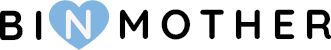
<style>
.page{position:relative;width:331px;height:50px;background:#ffffff}
.page>*{position:absolute;margin:0}
.t1{font:41.7px "Quicksand-Bold";letter-spacing:0.2em;color:#010101;text-transform:uppercase}
.t2{font:41.7px "Quicksand-Bold";letter-spacing:0.2em;color:#faf5f5;text-transform:uppercase}
</style>
<div class="page">
<p class="t1" style="left:0px;top:10px;width:42px;height:31px">BI</p>
<p class="t2" style="left:65px;top:9px;width:26px;height:31px">N</p>
<p class="t1" style="left:119px;top:9px;width:213px;height:31px">MOTHER</p>
</div>
